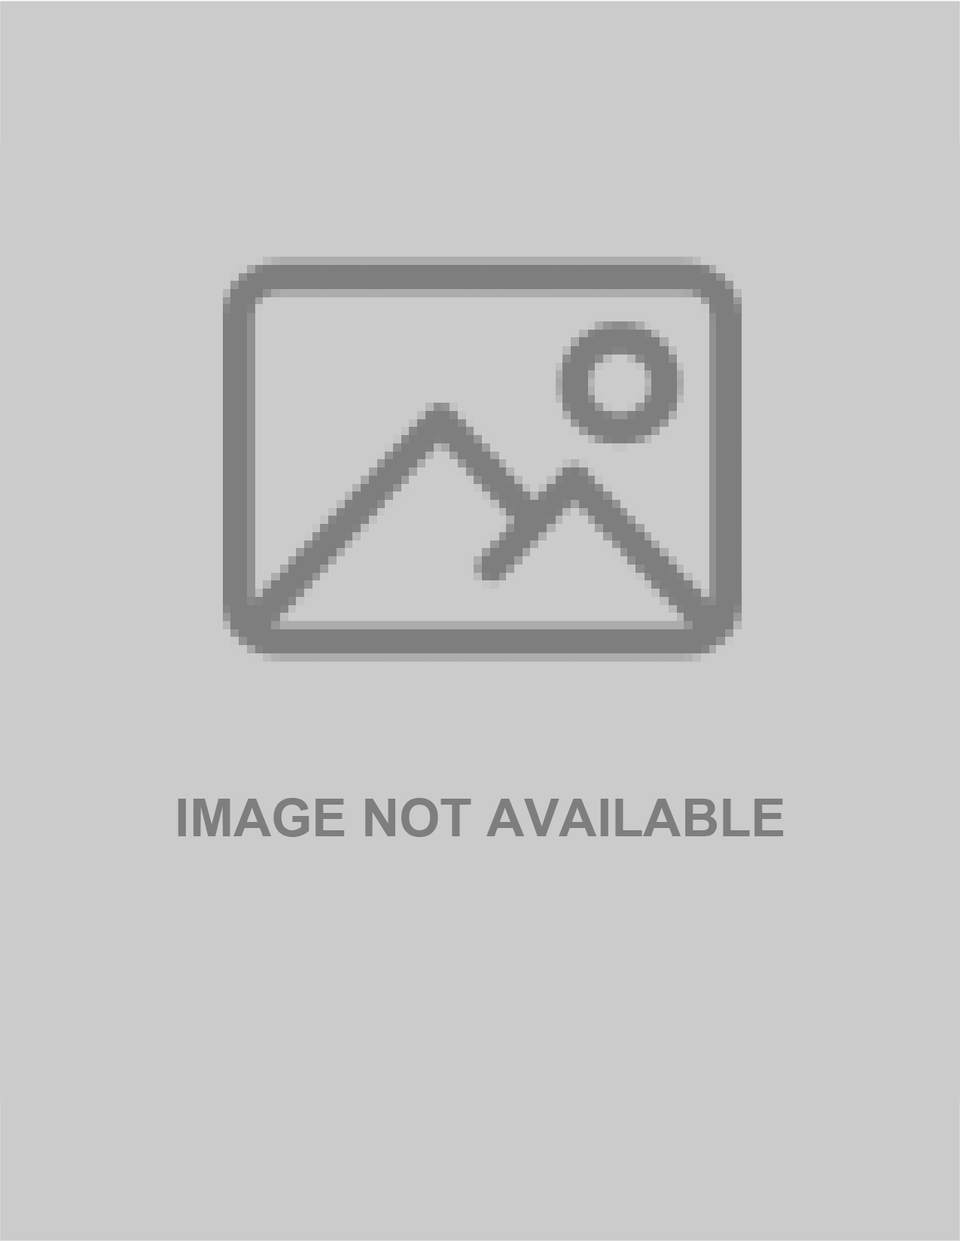
<style>
.page{position:relative;width:960px;height:1242px;background:#cbcbcb}
.page>*{position:absolute;margin:0}
.t1{font:52.4px "Arial-BoldMT";color:#7e7e7e}
</style>
<div class="page">
<p class="t1" style="left:178px;top:798px;width:606px;height:39px">IMAGE NOT AVAILABLE</p>
</div>
